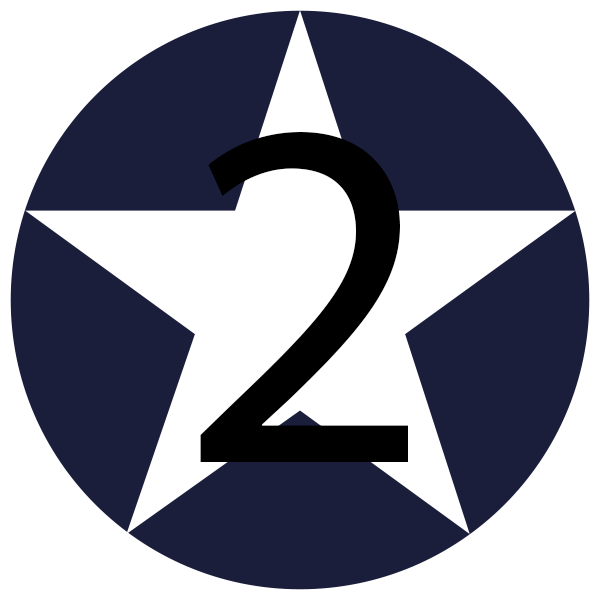
<style>
.page{position:relative;width:600px;height:600px;background:#ffffff}
.page>*{position:absolute;margin:0}
.t1{font:500px "MyriadPro-Regular";color:#000000}
</style>
<div class="page">
<p class="t1" style="left:200px;top:132px;width:208px;height:330px">2</p>
</div>
